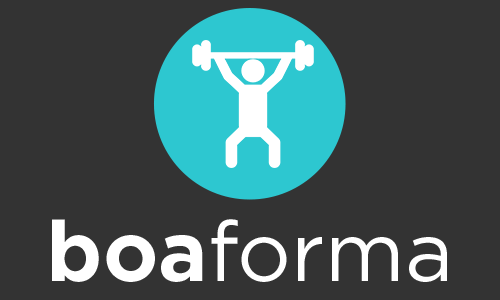
<style>
.page{position:relative;width:500px;height:300px;background:#333333}
.page>*{position:absolute;margin:0}
.t1{font:84.1px "Gotham-Book";color:#ffffff}
.t2{font:84.1px "Gotham-Bold";color:#ffffff}
</style>
<div class="page">
<p class="t1" style="left:52px;top:219px;width:395px;height:63px"><span class="t2">boa</span>forma</p>
</div>
